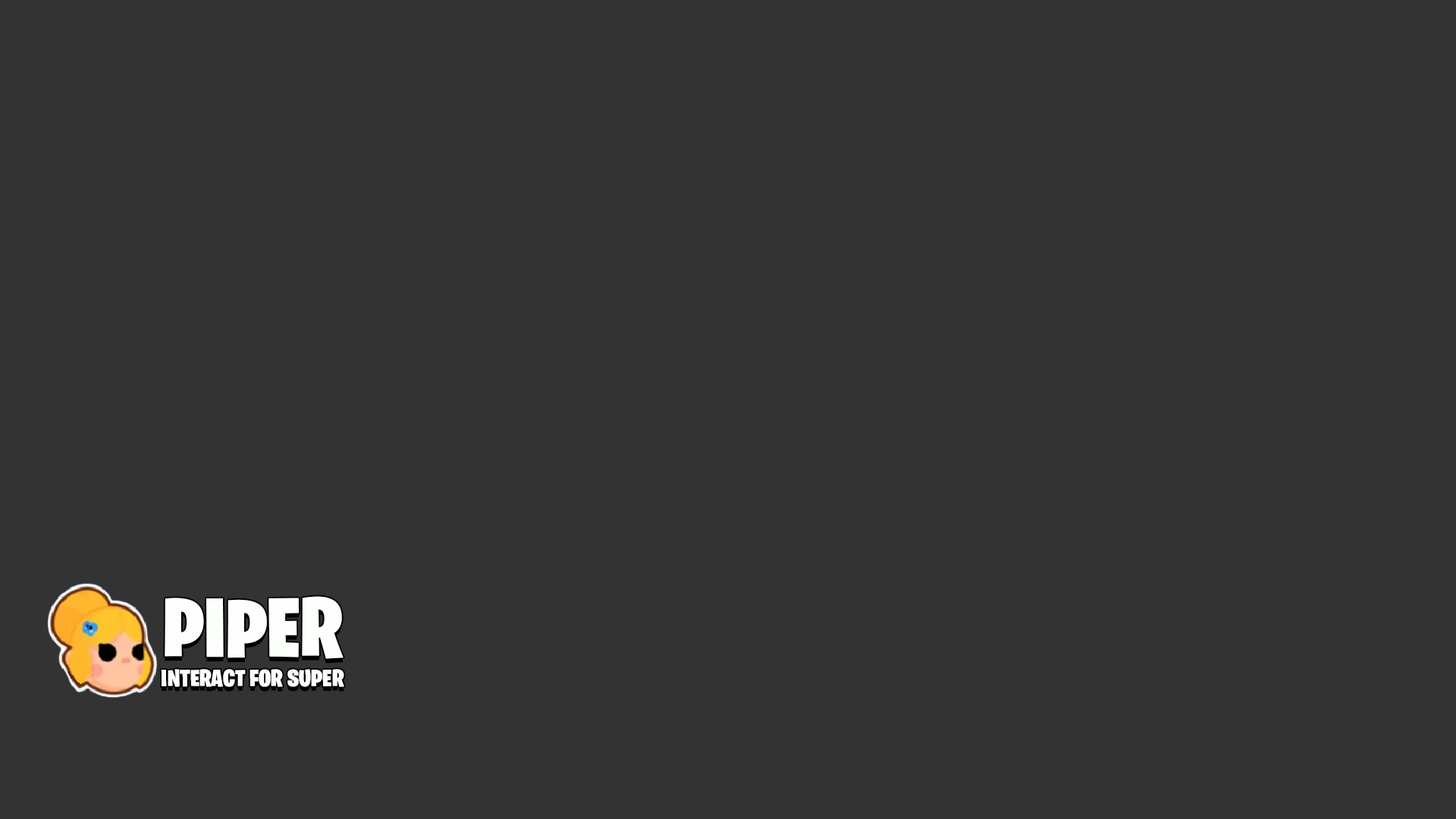
<style>
.page{position:relative;width:1456px;height:819px;background:#333333}
.page>*{position:absolute;margin:0}
.t1{font:84px "BurbankBigCondensed-Black";color:#fdfffd;scale:1.09 1}
.t2{font:23.9px "BurbankBigCondensed-Black";color:#fdfffd;scale:1.08 1}
</style>
<div class="page">
<p class="t1" style="left:165px;top:596px;width:179px;height:63px">PIPER</p>
<p class="t2" style="left:161px;top:669px;width:183px;height:18px">INTERACT FOR SUPER</p>
</div>
